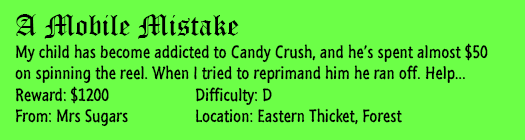
<style>
.page{position:relative;width:525px;height:140px;background:#6cff47}
.page>*{position:absolute;margin:0}
.t1{font:18px "SegoeMarker";color:#000000}
.t2{font:30px "OldEnglishTextMT";color:#000000}
</style>
<div class="page">
<p class="t1" style="left:15px;top:14px;width:473px;height:113px"><span class="t2">A Mobile Mistake<br></span>My child has become addicted to Candy Crush, and he’s spent almost $50 <br>on spinning the reel. When I tried to reprimand him he ran off. Help...<br>Reward: $1200   Difficulty: D<br>From: Mrs Sugars  Location: Eastern Thicket, Forest</p>
</div>
